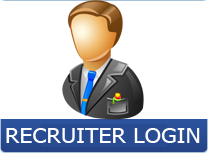
<style>
.page{position:relative;width:208px;height:153px;background:#ffffff}
.page>*{position:absolute;margin:0}
.t1{font:20.5px "Tahoma";color:#ffffff;scale:1.14 1}
</style>
<div class="page">
<p class="t1" style="left:6px;top:128px;width:194px;height:15px">RECRUITER LOGIN</p>
</div>
